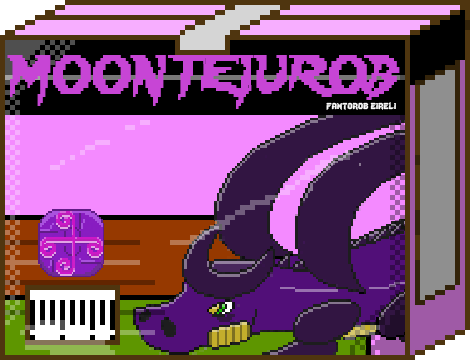
<style>
.page{position:relative;width:470px;height:360px}
.page>*{position:absolute;margin:0}
.t1{font:48px "Lady-Radical";color:#c745d5;scale:0.84 1}
.t2{font:12px "Lady-Radical";color:#fbfbfb}
</style>
<div class="page">
<p class="t1" style="left:7px;top:55px;width:393px;height:54px">MOONTEIUROB</p>
<p class="t2" style="left:326px;top:102px;width:70px;height:8px">fantorob eireli</p>
</div>
